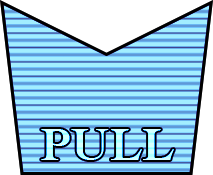
<style>
.page{position:relative;width:213px;height:175px;background:#a2eeff}
.page>*{position:absolute;margin:0}
.t1{font:48px "Cochin-Bold"}
</style>
<div class="page">
<p class="t1" style="left:41px;top:129px;width:133px;height:31px">PULL</p>
</div>
